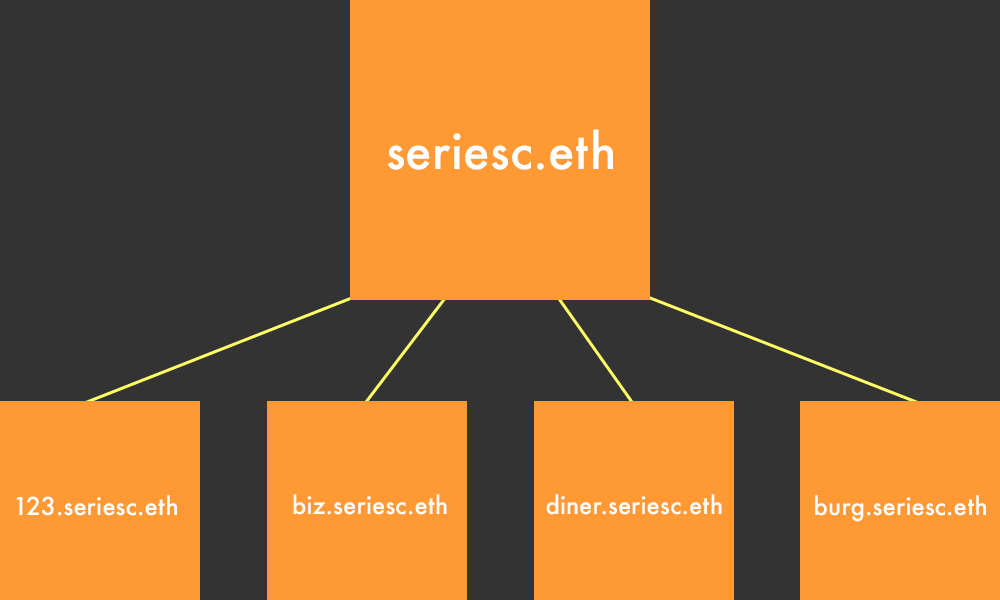
<style>
.page{position:relative;width:1000px;height:600px;background:#333333}
.page>*{position:absolute;margin:0}
.t1{font:48px "Futura-Medium";letter-spacing:0.005em;color:#ffffff}
.t2{font:24px "Futura-Medium";letter-spacing:0.005em;color:#ffffff}
</style>
<div class="page">
<p class="t1" style="left:387px;top:129px;width:226px;height:41px">seriesc.eth</p>
<p class="t2" style="left:16px;top:495px;width:161px;height:21px">123.seriesc.eth</p>
<p class="t2" style="left:293px;top:494px;width:154px;height:21px">biz.seriesc.eth</p>
<p class="t2" style="left:546px;top:494px;width:176px;height:21px">diner.seriesc.eth</p>
<p class="t2" style="left:815px;top:495px;width:171px;height:27px">burg.seriesc.eth</p>
</div>
